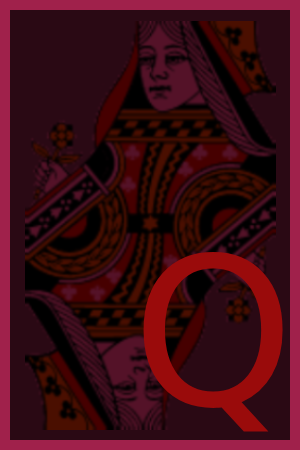
<style>
.page{position:relative;width:300px;height:450px;background:#2a0914}
.page>*{position:absolute;margin:0}
.t1{font:206px "DejaVuSans";color:#9a0b0b}
</style>
<div class="page">
<p class="t1" style="left:143px;top:252px;width:140px;height:180px">Q</p>
</div>
